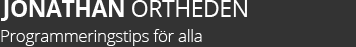
<style>
.page{position:relative;width:356px;height:47px;background:#333333}
.page>*{position:absolute;margin:0}
.t1{font:23px "OpenSans-Bold";letter-spacing:-0.02em;color:#ffffff}
.t2{font:23px "OpenSans";letter-spacing:-0.02em;color:#ffffff}
.t3{font:17px "OpenSans-Light";letter-spacing:-0.02em;color:#ffffff}
</style>
<div class="page">
<p class="t1" style="left:1px;top:0px;width:246px;height:21px">JONATHAN <span class="t2">ORTHEDEN</span></p>
<p class="t3" style="left:1px;top:29px;width:201px;height:17px">Programmeringstips för alla</p>
</div>
